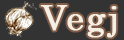
<style>
.page{position:relative;width:124px;height:40px;background:#333333}
.page>*{position:absolute;margin:0}
.t1{font:34.6px "Century";letter-spacing:0.06em;color:#f5eee2;font-weight:bold}
</style>
<div class="page">
<p class="t1" style="left:40px;top:5px;width:77px;height:33px">Vegj</p>
</div>
